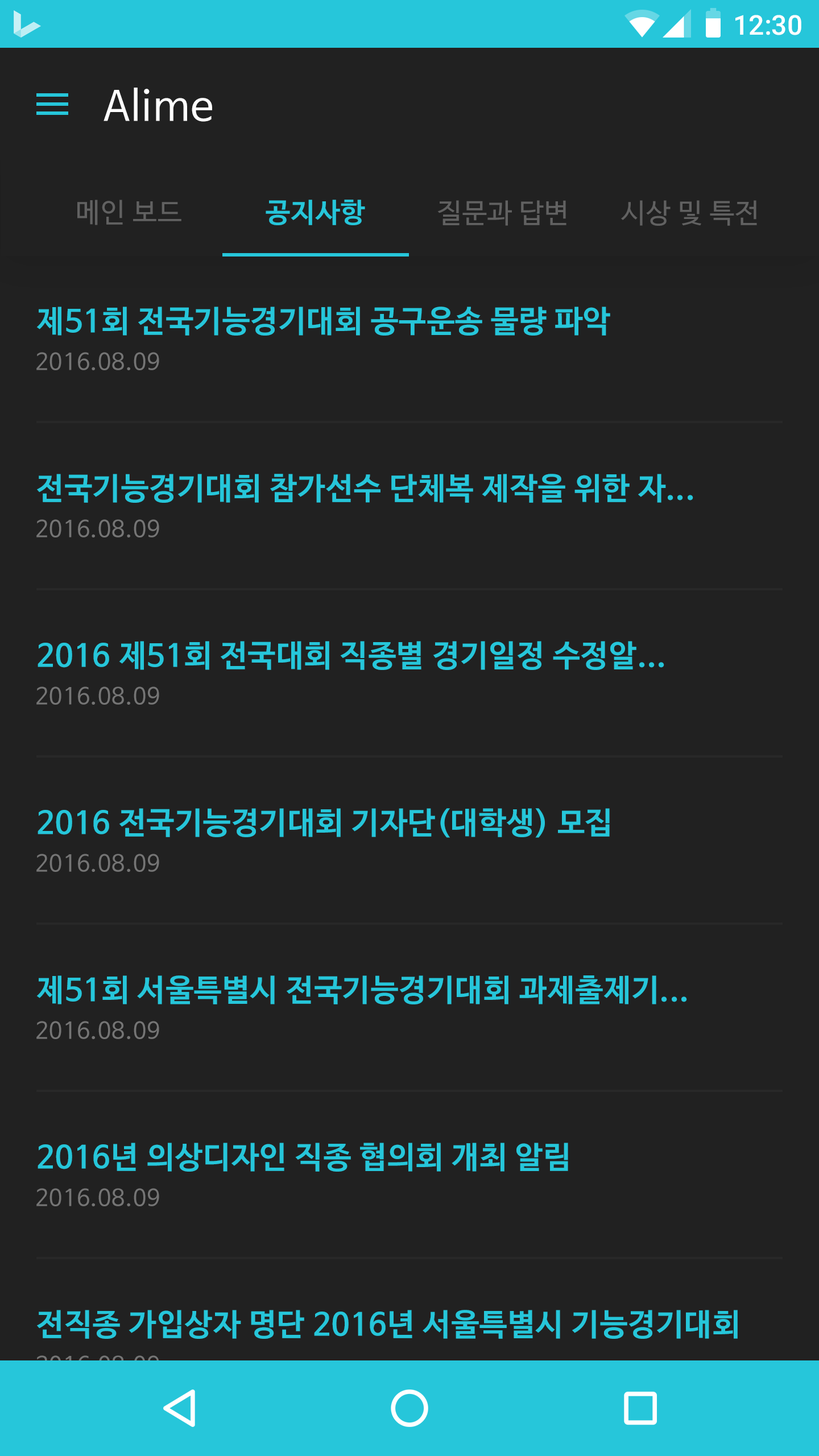
<style>
.page{position:relative;width:819px;height:1456px;background:#212121}
.page>*{position:absolute;margin:0}
.t1{font:27.3px "Roboto-Medium";color:#ffffff}
.t2{font:40.9px "NanumBarunGothic";letter-spacing:0.025em;color:#ffffff}
.t3{font:27.3px "NanumBarunGothic";letter-spacing:0.025em;color:#616161}
.t4{font:27.3px "NanumBarunGothicBold";letter-spacing:0.025em;color:#26c6da}
.t5{font:30.7px "NanumBarunGothicBold";letter-spacing:0.025em;color:#26c6da}
.t6{font:22.7px "NanumBarunGothic";letter-spacing:0.025em;color:#757575}
.t7{font:22.7px "NanumBarunGothic";letter-spacing:0.025em;color:#26c6da}
</style>
<div class="page">
<p class="t1" style="left:735px;top:15px;width:66px;height:20px">12:30</p>
<p class="t2" style="left:104px;top:88px;width:108px;height:34px">Alime</p>
<p class="t3" style="left:77px;top:200px;width:104px;height:25px">메인 보드</p>
<p class="t4" style="left:266px;top:200px;width:99px;height:25px">공지사항</p>
<p class="t3" style="left:437px;top:200px;width:129px;height:26px">질문과 답변</p>
<p class="t3" style="left:621px;top:200px;width:136px;height:26px">시상 및 특전</p>
<p class="t5" style="left:36px;top:307px;width:574px;height:29px">제51회 전국기능경기대회 공구운송 물량 파악</p>
<p class="t6" style="left:36px;top:352px;width:123px;height:18px">2016.08.09</p>
<p class="t5" style="left:37px;top:474px;width:656px;height:29px">전국기능경기대회 참가선수 단체복 제작을 위한 자...</p>
<p class="t6" style="left:36px;top:519px;width:123px;height:18px">2016.08.09</p>
<p class="t5" style="left:38px;top:641px;width:626px;height:29px">2016 제51회 전국대회 직종별 경기일정 수정알...</p>
<p class="t6" style="left:36px;top:686px;width:123px;height:19px">2016.08.09</p>
<p class="t5" style="left:38px;top:808px;width:572px;height:30px">2016 전국기능경기대회 기자단(대학생) 모집</p>
<p class="t6" style="left:36px;top:854px;width:123px;height:18px">2016.08.09</p>
<p class="t5" style="left:36px;top:975px;width:651px;height:29px">제51회 서울특별시 전국기능경기대회 과제출제기...</p>
<p class="t6" style="left:36px;top:1021px;width:123px;height:18px">2016.08.09</p>
<p class="t5" style="left:38px;top:1143px;width:530px;height:29px">2016년 의상디자인 직종 협의회 개최 알림</p>
<p class="t6" style="left:36px;top:1188px;width:123px;height:18px">2016.08.09</p>
<p class="t5" style="left:37px;top:1310px;width:701px;height:29px">전직종 가입상자 명단 2016년 서울특별시 기능경기대회</p>
<p class="t7" style="left:36px;top:1355px;width:123px;height:19px">2016.08.09</p>
</div>
